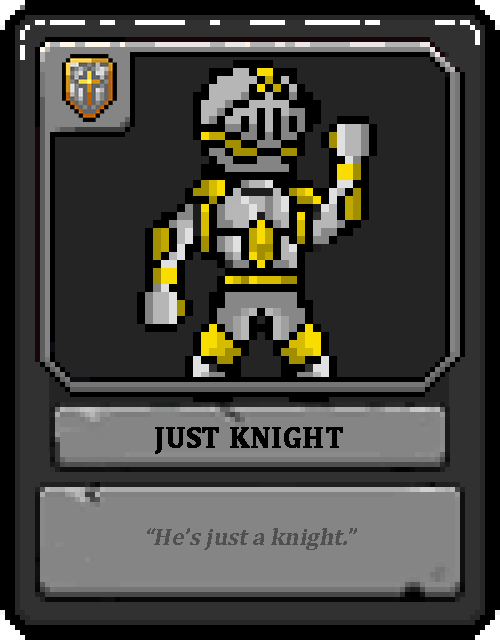
<style>
.page{position:relative;width:500px;height:640px;background:#242424}
.page>*{position:absolute;margin:0}
.t1{font:30px "Cambria-Bold";color:#000000;text-transform:uppercase;font-weight:bold}
.t2{font:24px "Cambria-Bold";color:#505050;font-style:italic}
</style>
<div class="page">
<p class="t1" style="left:155px;top:427px;width:188px;height:27px">Just Knight</p>
<p class="t2" style="left:147px;top:528px;width:210px;height:22px">“He’s just a knight.”</p>
</div>
